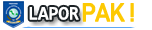
<style>
.page{position:relative;width:152px;height:30px;background:#ffffff}
.page>*{position:absolute;margin:0}
.t1{font:18.7px "Consolas";letter-spacing:-0.025em;color:#ffffff;font-weight:bold}
.t2{font:25px "Bahnschrift";letter-spacing:-0.075em;color:#fdc902;font-weight:bold;scale:0.96 1}
</style>
<div class="page">
<p class="t1" style="left:29px;top:6px;width:50px;height:14px">LAPOR</p>
<p class="t2" style="left:82px;top:3px;width:52px;height:19px">PAK !</p>
</div>
